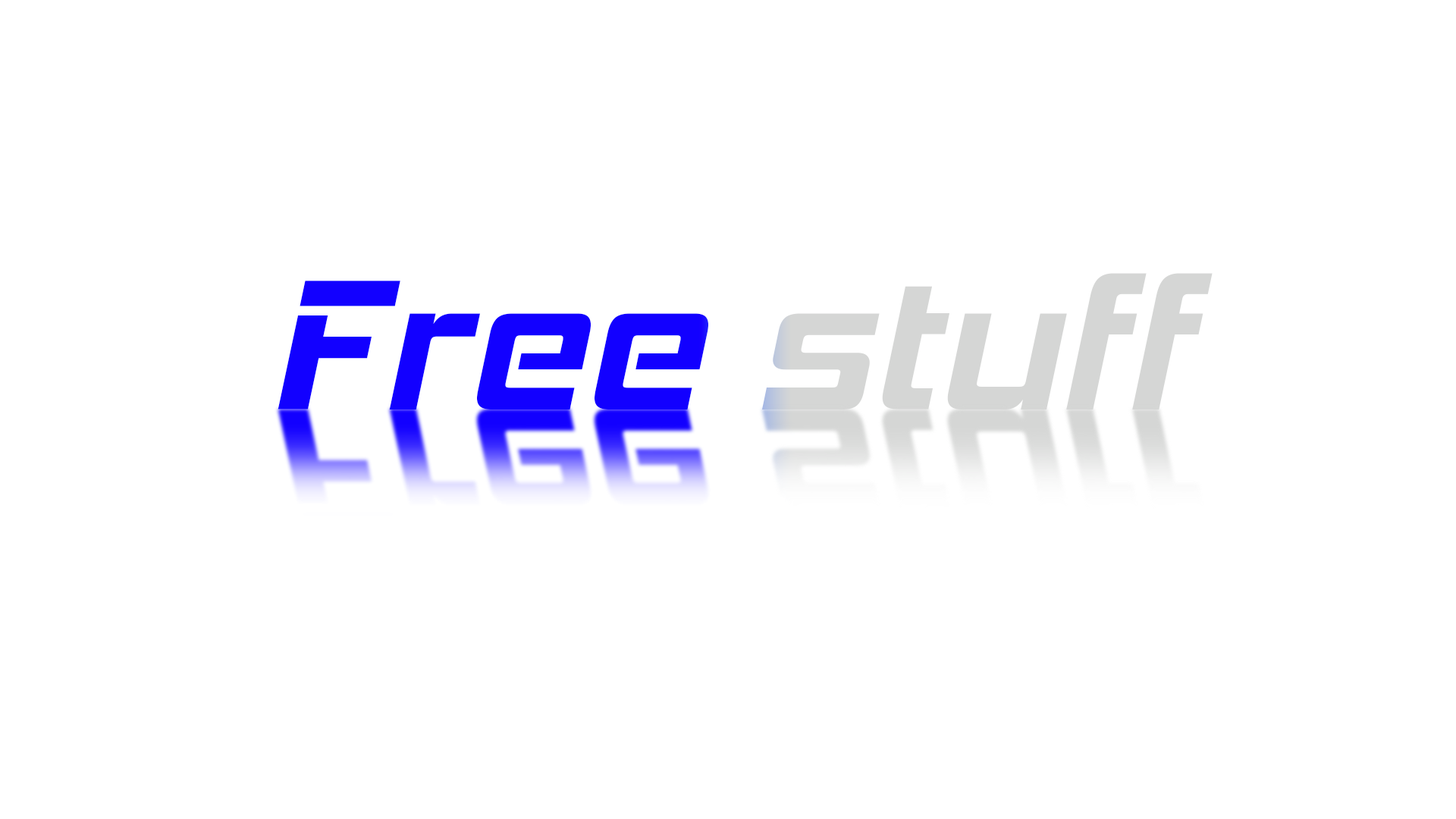
<style>
.page{position:relative;width:1456px;height:819px;background:#ffffff}
.page>*{position:absolute;margin:0}
.t1{font:189.6px "HemiHeadRg-BoldItalic"}
</style>
<div class="page">
<p class="t1" style="left:278px;top:273px;width:935px;height:136px">Free stuff</p>
</div>
